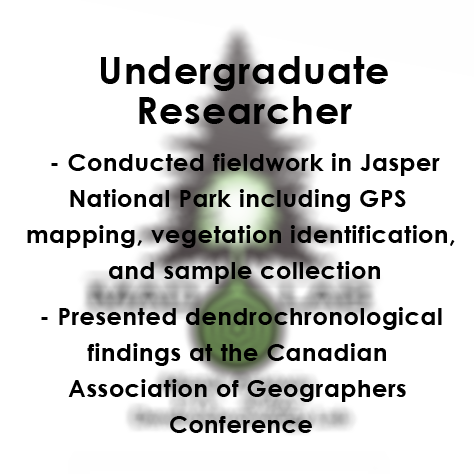
<style>
.page{position:relative;width:474px;height:474px;background:#ffffff}
.page>*{position:absolute;margin:0}
.t1{font:38px/40px "CenturyGothic-Bold";letter-spacing:0.025em;color:#000000}
.t2{font:24px/36px "CenturyGothic-Bold";letter-spacing:0.025em;color:#000000}
.t3{font:24px/36px "CenturyGothic";letter-spacing:0.025em;color:#000000}
</style>
<div class="page">
<p class="t1" style="left:101px;top:56px;width:287px;height:68px;text-align:center">Undergraduate<br>Researcher</p>
<p class="t2" style="left:27px;top:153px;width:428px;height:280px;text-align:center"><span class="t3"> </span>- Conducted fieldwork in Jasper<br>National Park including GPS <br>mapping, vegetation identification,<br> and sample collection<br>                     <br>- Presented dendrochronological<br>findings at the Canadian <br>Association of Geographers <br>Conference</p>
</div>
